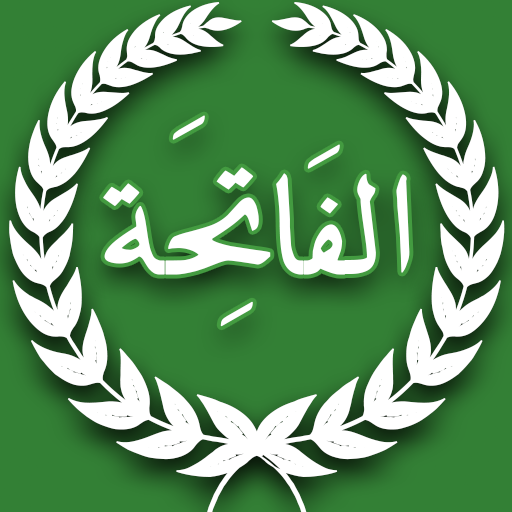
<style>
.page{position:relative;width:512px;height:512px;background:#ffffff}
.page>*{position:absolute;margin:0}
.t1{font:162.3px "";color:#ffffff;font-weight:bold}
</style>
<div class="page">
<p class="t1" style="left:103px;top:115px;width:307px;height:212px">الفَاتِحَة</p>
</div>
